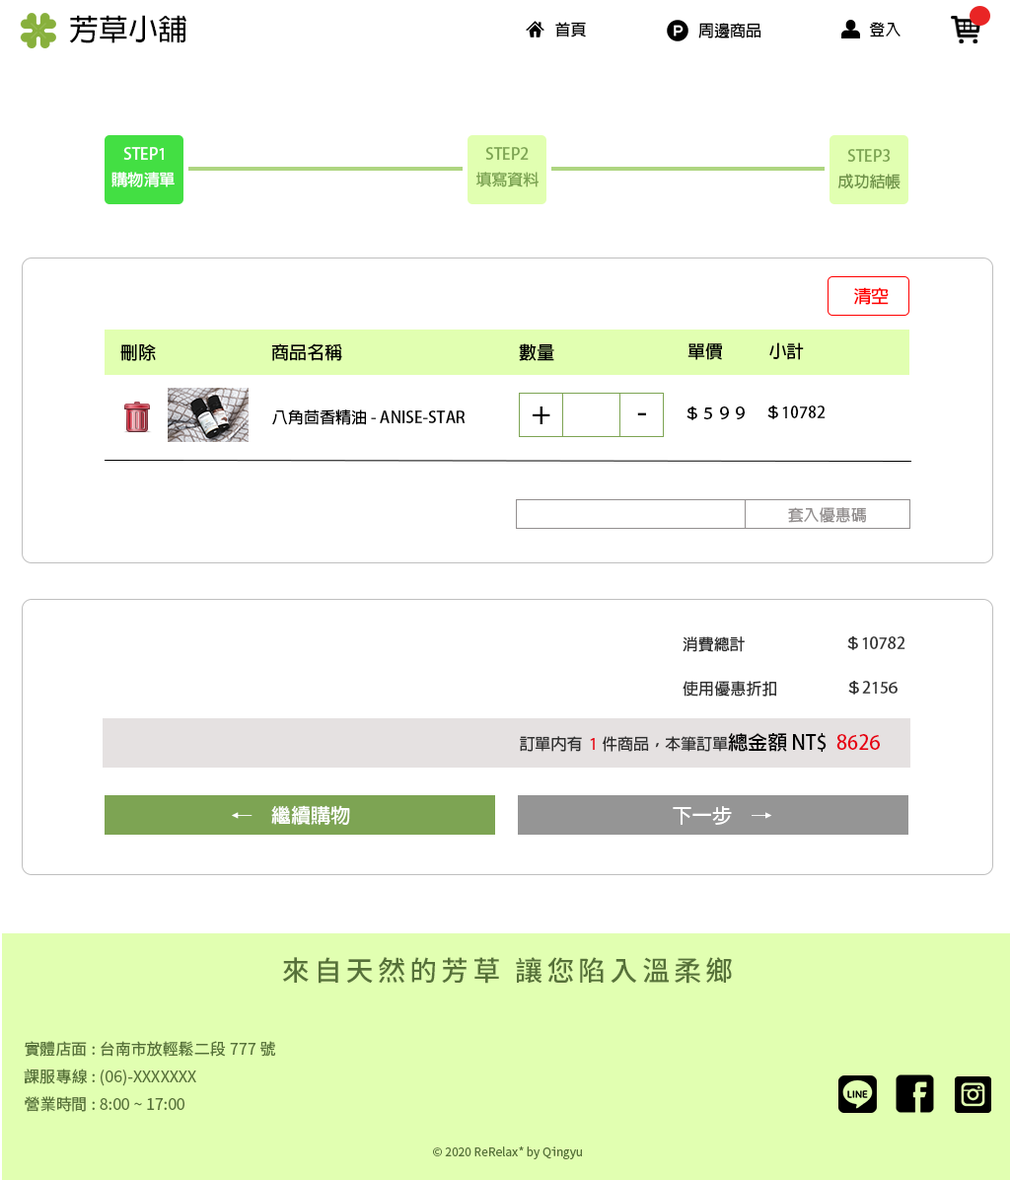
<style>
.page{position:relative;width:1010px;height:1180px;background:#ffffff}
.page>*{position:absolute;margin:0}
.t1{font:29.6px "AdobeFanHeitiStd-Bold";color:#000000}
.t2{font:15.8px "AdobeFanHeitiStd-Bold";color:#000000}
.t3{font:15.8px "AdobeFanHeitiStd-Bold";color:#ffffff}
.t4{font:15.8px "AdobeFanHeitiStd-Bold";color:#7da453}
.t5{font:15.8px "AdobeFanHeitiStd-Bold";color:#70934a}
.t6{font:17.8px "AdobeFanHeitiStd-Bold";color:#ff0000}
.t7{font:17.8px "AdobeFanHeitiStd-Bold";color:#000000}
.t8{font:15.8px "AdobeFanHeitiStd-Bold";color:#938f8f}
.t9{font:15.8px "AdobeFanHeitiStd-Bold";color:#313131}
.t10{font:15.8px "AdobeFanHeitiStd-Bold";color:#e60012}
.t11{font:19.7px "AdobeFanHeitiStd-Bold";color:#000000}
.t12{font:19.7px "AdobeFanHeitiStd-Bold";color:#e60012}
.t13{font:19.7px "AdobeFanHeitiStd-Bold";color:#ffffff}
.t14{font:19.7px "AdobeFanHeitiStd-Bold";color:#fefefe}
.t15{font:27.6px "NotoSansTC-Medium";letter-spacing:0.15em;color:#567139}
.t16{font:15.8px "NotoSansTC-Regular";color:#567139}
.t17{font:11.8px "NotoSansTC-Regular";color:#567139}
</style>
<div class="page">
<p class="t1" style="left:69px;top:15px;width:117px;height:28px">芳草小舖</p>
<p class="t2" style="left:556px;top:22px;width:30px;height:15px">首頁</p>
<p class="t2" style="left:699px;top:23px;width:63px;height:15px">周邊商品</p>
<p class="t2" style="left:869px;top:22px;width:32px;height:15px">登入</p>
<p class="t3" style="left:123px;top:147px;width:41px;height:13px">STEP1</p>
<p class="t4" style="left:485px;top:147px;width:44px;height:13px">STEP2</p>
<p class="t4" style="left:848px;top:149px;width:43px;height:13px">STEP3</p>
<p class="t3" style="left:112px;top:172px;width:63px;height:15px">購物清單</p>
<p class="t4" style="left:476px;top:172px;width:63px;height:15px">填寫資料</p>
<p class="t5" style="left:838px;top:174px;width:63px;height:15px">成功結帳</p>
<p class="t6" style="left:855px;top:287px;width:34px;height:18px">清空</p>
<p class="t7" style="left:120px;top:343px;width:36px;height:18px">刪除</p>
<p class="t7" style="left:271px;top:343px;width:71px;height:18px">商品名稱</p>
<p class="t7" style="left:519px;top:343px;width:36px;height:18px">數量</p>
<p class="t7" style="left:688px;top:342px;width:34px;height:18px">單價</p>
<p class="t7" style="left:770px;top:342px;width:34px;height:18px">小計</p>
<p class="t2" style="left:272px;top:409px;width:194px;height:16px">八角茴香精油- ANISE-STAR</p>
<p class="t1" style="left:533px;top:407px;width:18px;height:17px">+</p>
<p class="t1" style="left:637px;top:412px;width:9px;height:3px">-</p>
<p class="t2" style="left:687px;top:407px;width:58px;height:13px">＄５９９</p>
<p class="t2" style="left:768px;top:406px;width:58px;height:13px">＄10782</p>
<p class="t8" style="left:788px;top:507px;width:78px;height:16px">套入優惠碼</p>
<p class="t9" style="left:683px;top:636px;width:62px;height:16px">消費總計</p>
<p class="t9" style="left:848px;top:636px;width:58px;height:14px">＄10782</p>
<p class="t9" style="left:683px;top:681px;width:94px;height:16px">使用優惠折扣</p>
<p class="t9" style="left:849px;top:681px;width:49px;height:14px">＄2156</p>
<p class="t9" style="left:520px;top:733px;width:360px;height:19px">訂單內有  <span class="t10">1</span> 件商品，本筆訂單<span class="t11">總金額 NT$  </span><span class="t12">8626</span></p>
<p class="t13" style="left:232px;top:805px;width:118px;height:20px">←　繼續購物</p>
<p class="t14" style="left:673px;top:806px;width:100px;height:19px">下一步　→</p>
<p class="t15" style="left:282px;top:957px;width:450px;height:27px">來自天然的芳草 讓您陷入溫柔鄉</p>
<p class="t16" style="left:24px;top:1041px;width:251px;height:71px">實體店面: 台南市放輕鬆二段777號 <br>課服專線: (06)-XXXXXXX<br>營業時間: 8:00 ~ 17:00</p>
<p class="t17" style="left:433px;top:1147px;width:149px;height:12px">© 2020 ReRelax* by Qingyu</p>
</div>
